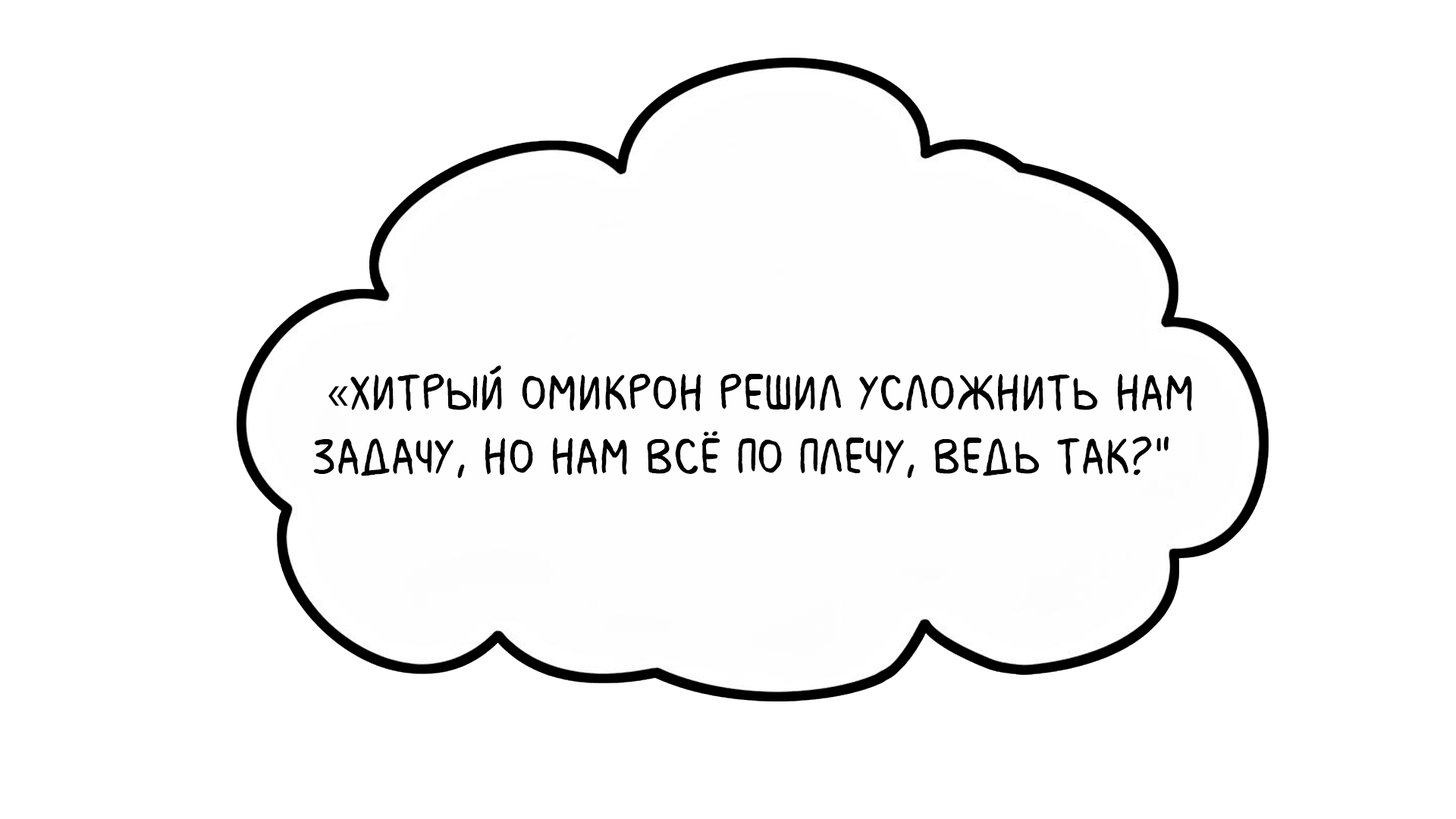
<style>
.page{position:relative;width:1456px;height:819px;background:#ffffff}
.page>*{position:absolute;margin:0}
.t1{font:53.1px "MilkMustacheBB";color:#000000}
.t2{font:53.1px "MyriadPro-Regular";color:#000000}
</style>
<div class="page">
<p class="t1" style="left:313px;top:366px;width:879px;height:113px"><span class="t2">«</span>Хитрый Омикрон решил усложнить нам <br>задачу, но нам всё по плечу, ведь так?"</p>
</div>
